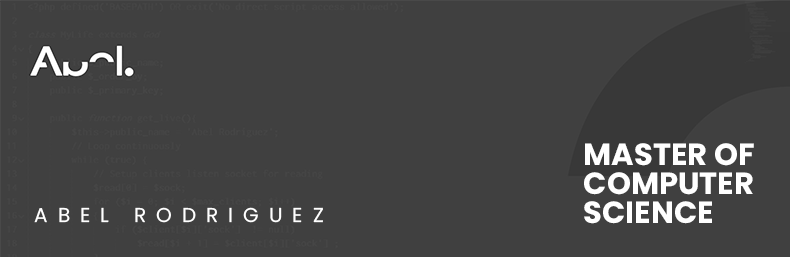
<style>
.page{position:relative;width:790px;height:257px;background:#404040}
.page>*{position:absolute;margin:0}
.t1{font:30.5px/28.6px "Poppins-Bold";color:#ffffff;text-transform:uppercase}
.t2{font:20px "Poppins-Regular";letter-spacing:0.5em;color:#ffffff;text-transform:uppercase}
</style>
<div class="page">
<p class="t1" style="left:584px;top:143px;width:170px;height:81px">Master of <br>Computer<br>Science</p>
<p class="t2" style="left:34px;top:207px;width:289px;height:16px">Abel Rodriguez</p>
</div>
